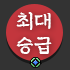
<style>
.page{position:relative;width:70px;height:70px;background:#333333}
.page>*{position:absolute;margin:0}
.t1{font:20px "ChosunCentennial";letter-spacing:-0.01em;color:#ffffff}
</style>
<div class="page">
<p class="t1" style="left:16px;top:12px;width:36px;height:42px">최대<br>승급</p>
</div>
